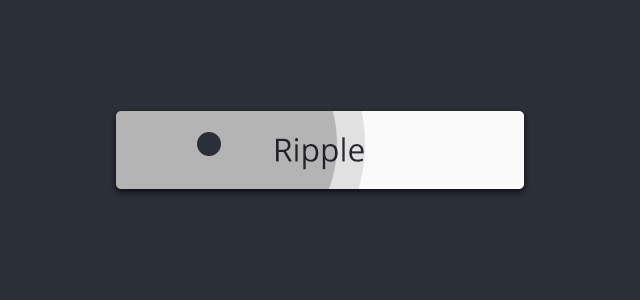
<style>
.page{position:relative;width:640px;height:300px;background:#2b2f37}
.page>*{position:absolute;margin:0}
.t1{font:32px "OpenSans";color:#2b2f37}
</style>
<div class="page">
<p class="t1" style="left:276px;top:137px;width:88px;height:33px">Ripple</p>
</div>
